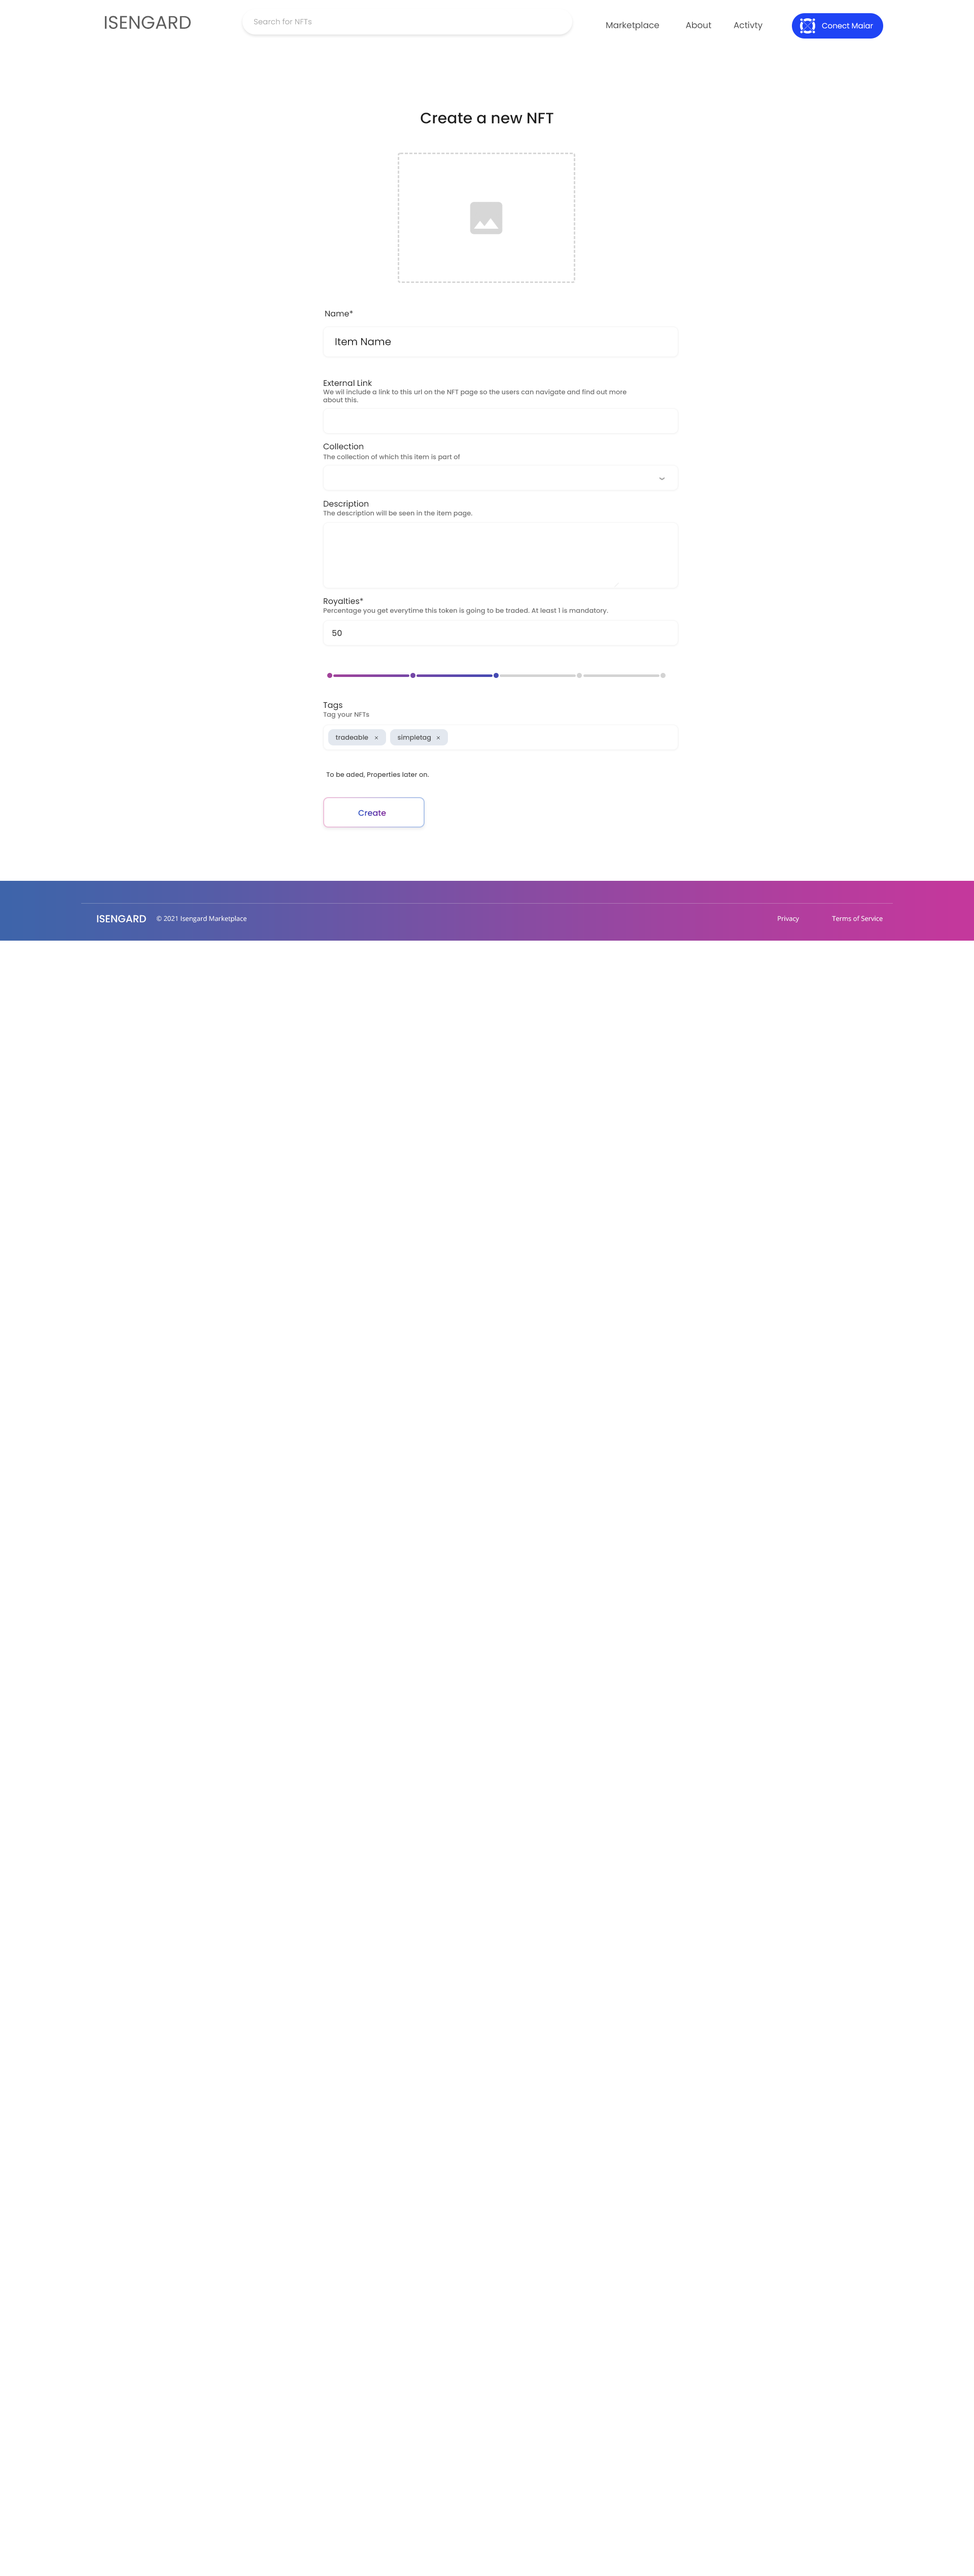
<style>
.page{position:relative;width:974px;height:2576px;background:#ffffff}
.page>*{position:absolute;margin:0}
.t1{font:18.3px "Poppins-Regular";color:#5d5d5d}
.t2{font:7.6px "Poppins-Regular";color:#aaaaaa}
.t3{font:8.6px "Poppins-Regular";color:#454545}
.t4{font:7.6px "Poppins-Regular";color:#ffffff}
.t5{font:15.2px "Poppins-Medium";color:#1f1f1f}
.t6{font:8.1px "Poppins-Regular";color:#1f1f1f}
.t7{font:10.1px "Poppins-Regular";color:#1f1f1f}
.t8{font:6.6px "Poppins-Medium";color:#6c6c6c}
.t9{font:8.1px "Poppins-Medium";color:#3b3b3b}
.t10{font:6.6px "Poppins-Medium";color:#4a4a4a}
.t11{font:8.1px "Poppins-Medium"}
.t12{font:10.1px "Poppins-Medium";color:#ffffff}
.t13{font:6.6px "OpenSans-Regular";color:#ffffff}
</style>
<div class="page">
<p class="t1" style="left:104px;top:16px;width:87px;height:13px">ISENGARD</p>
<p class="t2" style="left:254px;top:18px;width:57px;height:7px">Search for NFTs</p>
<p class="t3" style="left:606px;top:21px;width:156px;height:9px">Marketplace     About     Activty</p>
<p class="t4" style="left:821px;top:22px;width:52px;height:7px">Conect Maiar</p>
<p class="t5" style="left:420px;top:113px;width:133px;height:11px">Create a new NFT</p>
<p class="t6" style="left:325px;top:310px;width:28px;height:7px">Name*</p>
<p class="t7" style="left:335px;top:338px;width:56px;height:7px">Item Name</p>
<p class="t8" style="left:323px;top:389px;width:303px;height:14px">We wil include a link to this url on the NFT page so the users can navigate and find out more about this.</p>
<p class="t6" style="left:324px;top:379px;width:48px;height:7px">External Link</p>
<p class="t6" style="left:323px;top:443px;width:40px;height:7px">Collection</p>
<p class="t8" style="left:323px;top:454px;width:137px;height:7px">The collection of which this item is part of</p>
<p class="t6" style="left:324px;top:500px;width:44px;height:9px">Description</p>
<p class="t8" style="left:323px;top:510px;width:149px;height:7px">The description will be seen in the item page.</p>
<p class="t6" style="left:324px;top:597px;width:39px;height:9px">Royalties*</p>
<p class="t8" style="left:324px;top:607px;width:284px;height:8px">Percentage you get everytime this token is going to be traded. At least 1 is mandatory.</p>
<p class="t9" style="left:332px;top:630px;width:10px;height:6px">50</p>
<p class="t6" style="left:323px;top:702px;width:19px;height:8px">Tags</p>
<p class="t8" style="left:323px;top:712px;width:46px;height:7px">Tag your NFTs</p>
<p class="t10" style="left:335px;top:735px;width:33px;height:5px">tradeable</p>
<p class="t10" style="left:398px;top:734px;width:33px;height:8px">simpletag</p>
<p class="t10" style="left:326px;top:772px;width:103px;height:7px">To be aded, Properties later on.</p>
<p class="t11" style="left:358px;top:810px;width:28px;height:6px">Create</p>
<p class="t12" style="left:97px;top:915px;width:49px;height:7px">ISENGARD</p>
<p class="t13" style="left:157px;top:916px;width:725px;height:6px">© 2021 Isengard Marketplace                              Privacy     Terms of Service</p>
</div>
